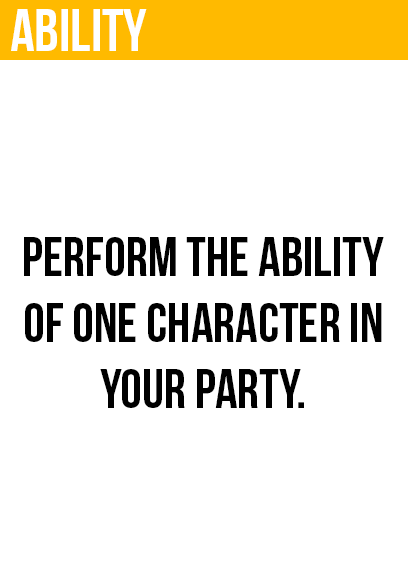
<style>
.page{position:relative;width:408px;height:585px;background:#ffffff}
.page>*{position:absolute;margin:0}
.t1{font:60px "BebasNeue";color:#ffffff}
.t2{font:55px "BebasNeue";color:#000000}
</style>
<div class="page">
<p class="t1" style="left:11px;top:9px;width:136px;height:42px">ability</p>
<p class="t2" style="left:24px;top:237px;width:360px;height:171px;text-align:center">perform the ability<br>of one character in<br>your party.</p>
</div>
